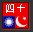
<style>
.page{position:relative;width:33px;height:32px;background:#f20000}
.page>*{position:absolute;margin:0}
.t1{font:10.4px "SimSun";color:#ffffff}
</style>
<div class="page">
<p class="t1" style="left:6px;top:4px;width:19px;height:9px">四十</p>
</div>
